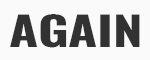
<style>
.page{position:relative;width:150px;height:60px;background:#fafafa}
.page>*{position:absolute;margin:0}
.t1{font:39.7px "Oswald-Bold";color:#323232;scale:1.33 1}
</style>
<div class="page">
<p class="t1" style="left:10px;top:14px;width:130px;height:34px">AGAIN</p>
</div>
